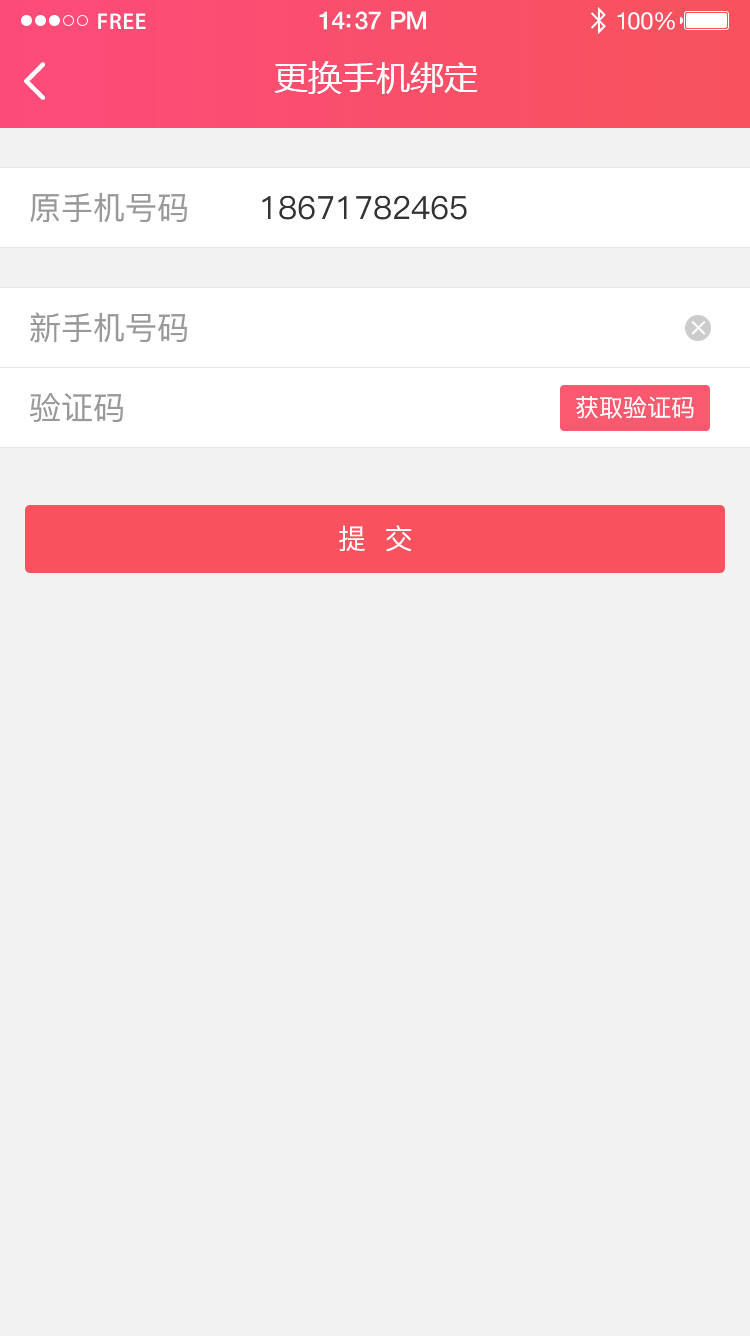
<style>
.page{position:relative;width:750px;height:1336px;background:#f2f2f2}
.page>*{position:absolute;margin:0}
.t1{font:23px "MyriadPro-Semibold";letter-spacing:0.02em;color:#ffffff}
.t2{font:25px "HelveticaNeue-Medium";letter-spacing:-0.02em;color:#ffffff}
.t3{font:24px "HelveticaNeue";letter-spacing:-0.02em;color:#ffffff}
.t4{font:34px "MicrosoftYaHei";color:#ffffff;text-transform:uppercase}
.t5{font:32px "PingFang-SC-Medium";color:#999999;text-transform:uppercase}
.t6{font:32px "PingFang-SC-Medium";color:#333333;text-transform:uppercase}
.t7{font:28px "PingFang-SC-Medium";color:#ffffff;text-transform:uppercase}
.t8{font:24px "PingFang-SC-Medium";color:#fefefe;text-transform:uppercase}
</style>
<div class="page">
<p class="t1" style="left:98px;top:13px;width:48px;height:16px">FREE</p>
<p class="t2" style="left:319px;top:11px;width:107px;height:19px">14:37 PM</p>
<p class="t3" style="left:617px;top:12px;width:58px;height:18px">100%</p>
<p class="t4" style="left:274px;top:61px;width:204px;height:33px">更换手机绑定</p>
<p class="t5" style="left:30px;top:192px;width:157px;height:31px">原手机号码</p>
<p class="t6" style="left:262px;top:195px;width:205px;height:25px">18671782465</p>
<p class="t5" style="left:30px;top:312px;width:157px;height:31px">新手机号码</p>
<p class="t7" style="left:691px;top:321px;width:15px;height:14px">×</p>
<p class="t5" style="left:30px;top:393px;width:93px;height:29px">验证码</p>
<p class="t8" style="left:576px;top:396px;width:118px;height:23px">获取验证码</p>
<p class="t7" style="left:339px;top:525px;width:73px;height:27px">提  交</p>
</div>
